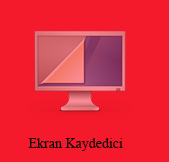
<style>
.page{position:relative;width:169px;height:162px;background:#f4192b}
.page>*{position:absolute;margin:0}
.t1{font:14px "TimesNewRomanPSMT";color:#060606}
</style>
<div class="page">
<p class="t1" style="left:28px;top:138px;width:95px;height:13px">Ekran Kaydedici</p>
</div>
